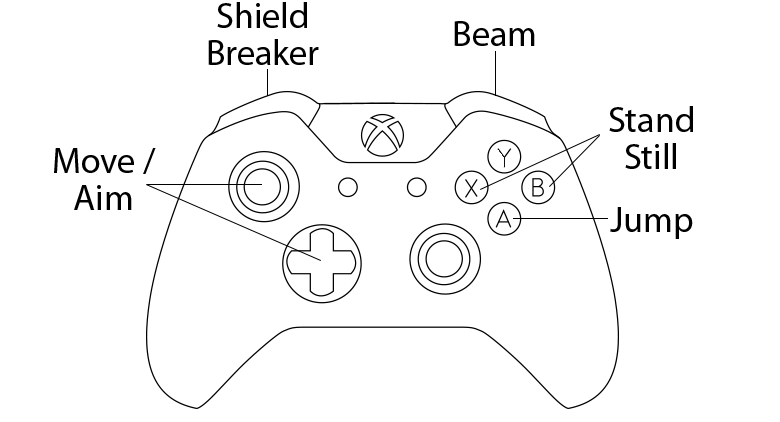
<style>
.page{position:relative;width:780px;height:422px;background:#ffffff}
.page>*{position:absolute;margin:0}
.t1{font:36px/37px "MyriadPro-Regular";color:#000000}
.t2{font:36px "MyriadPro-Regular";color:#000000}
</style>
<div class="page">
<p class="t1" style="left:208px;top:2px;width:111px;height:63px;text-align:center">Shield Breaker</p>
<p class="t2" style="left:454px;top:21px;width:81px;height:25px">Beam</p>
<p class="t1" style="left:609px;top:106px;width:84px;height:63px;text-align:center">Stand Still</p>
<p class="t1" style="left:54px;top:148px;width:102px;height:62px;text-align:center">Move / Aim</p>
<p class="t2" style="left:610px;top:207px;width:83px;height:32px">Jump</p>
</div>
